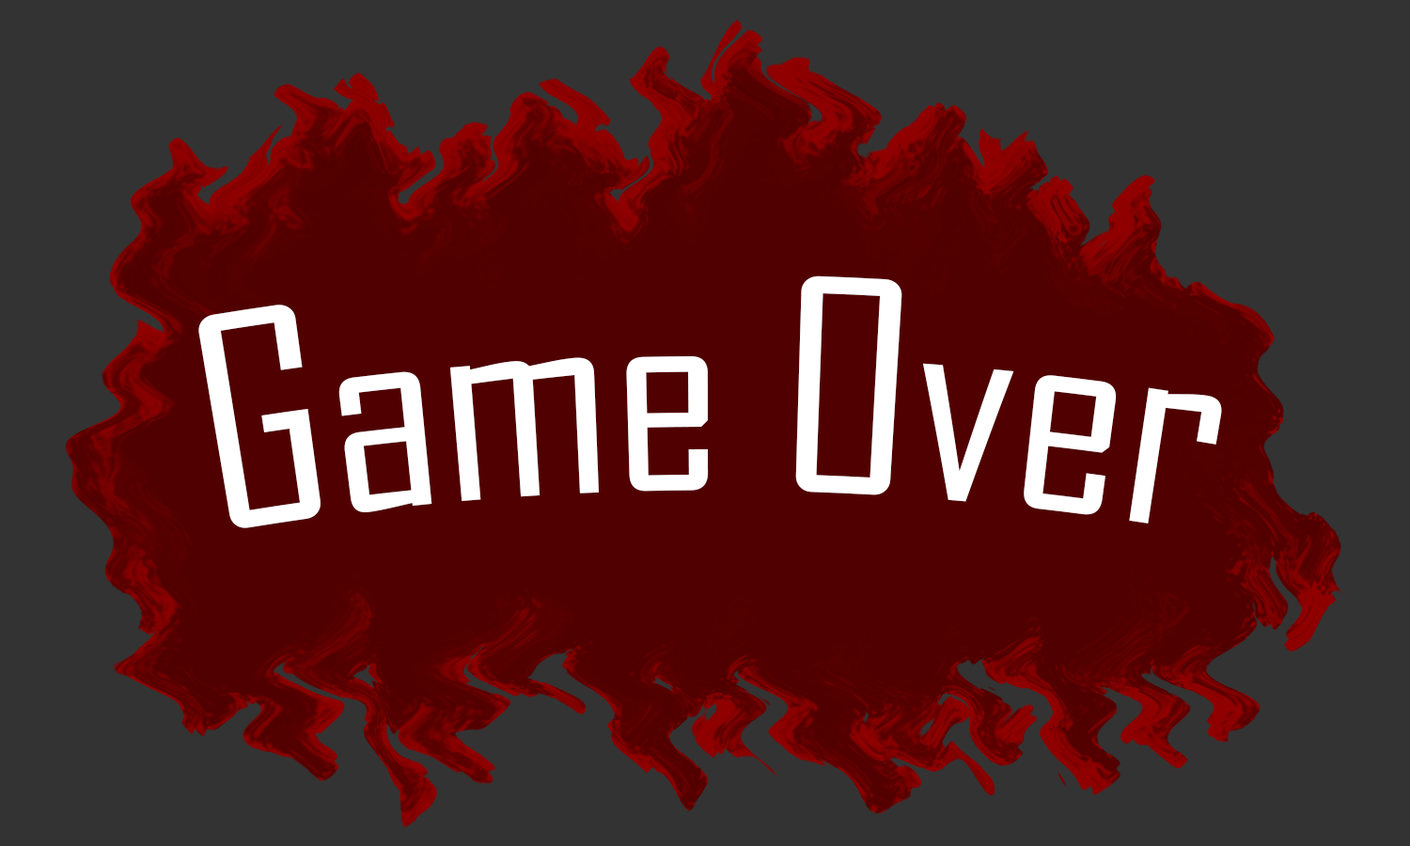
<style>
.page{position:relative;width:1410px;height:846px;background:#333333}
.page>*{position:absolute;margin:0}
.t1{font:281.9px "AgencyFB-Reg";color:#ffffff}
</style>
<div class="page">
<p class="t1" style="left:198px;top:275px;width:1024px;height:253px">Game Over</p>
</div>
